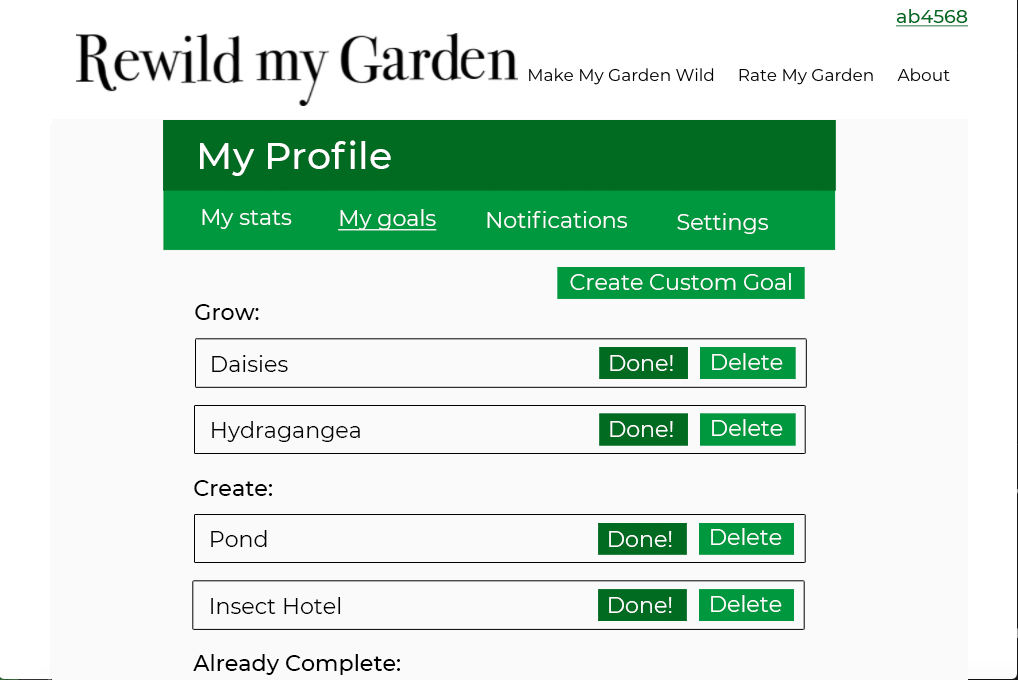
<style>
.page{position:relative;width:1018px;height:680px;background:#fafafa}
.page>*{position:absolute;margin:0}
.t1{font:19px "Montserrat-Medium";color:#006b21;text-decoration:underline}
.t2{font:38px "Montserrat-Medium";color:#ffffff}
.t3{font:22.2px "Montserrat-Regular";color:#ffffff}
.t4{font:22.2px "Montserrat-Regular";color:#ffffff;text-decoration:underline}
.t5{font:22.2px "Montserrat-Medium";color:#000000}
.t6{font:22.2px "Montserrat-Regular";color:#010101}
</style>
<div class="page">
<p class="t1" style="left:896px;top:9px;width:72px;height:18px">ab4568</p>
<p class="t2" style="left:200px;top:140px;width:191px;height:36px">My Profile</p>
<p class="t3" style="left:202px;top:209px;width:90px;height:20px">My stats</p>
<p class="t4" style="left:338px;top:209px;width:99px;height:22px">My goals</p>
<p class="t3" style="left:487px;top:211px;width:140px;height:17px">Notifications</p>
<p class="t3" style="left:677px;top:213px;width:91px;height:21px">Settings</p>
<p class="t3" style="left:570px;top:273px;width:221px;height:17px">Create Custom Goal</p>
<p class="t5" style="left:195px;top:304px;width:64px;height:16px">Grow:</p>
<p class="t3" style="left:712px;top:353px;width:71px;height:17px">Delete</p>
<p class="t6" style="left:212px;top:355px;width:76px;height:17px">Daisies</p>
<p class="t3" style="left:610px;top:355px;width:63px;height:16px">Done!</p>
<p class="t6" style="left:212px;top:421px;width:148px;height:21px">Hydragangea</p>
<p class="t3" style="left:610px;top:421px;width:63px;height:16px">Done!</p>
<p class="t3" style="left:712px;top:419px;width:71px;height:17px">Delete</p>
<p class="t5" style="left:194px;top:480px;width:79px;height:16px">Create:</p>
<p class="t6" style="left:211px;top:530px;width:56px;height:17px">Pond</p>
<p class="t3" style="left:609px;top:531px;width:63px;height:16px">Done!</p>
<p class="t3" style="left:711px;top:528px;width:71px;height:17px">Delete</p>
<p class="t6" style="left:211px;top:597px;width:130px;height:17px">Insect Hotel</p>
<p class="t3" style="left:609px;top:597px;width:63px;height:16px">Done!</p>
<p class="t3" style="left:711px;top:595px;width:71px;height:17px">Delete</p>
<p class="t5" style="left:193px;top:654px;width:208px;height:21px">Already Complete:</p>
</div>
